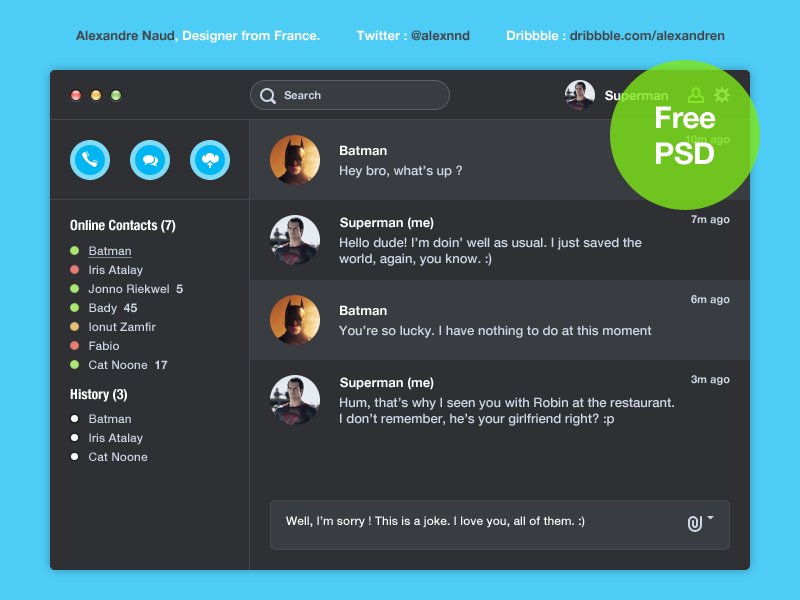
<style>
.page{position:relative;width:800px;height:600px;background:#2e3033}
.page>*{position:absolute;margin:0}
.t1{font:13px "HelveticaNeue-Bold";color:#ffffff}
.t2{font:13px "HelveticaNeue-Bold";color:#45474d}
.t3{font:11px "HelveticaNeue-Bold";color:#cfd6e6}
.t4{font:13px "HelveticaNeue-Bold";color:#98eb45}
.t5{font:30px "HelveticaNeue-Bold";letter-spacing:-0.015em;color:#ffffff}
.t6{font:11px "HelveticaNeue-Bold";color:#8ee340}
.t7{font:13px "HelveticaNeue-Medium";color:#cfd6e6}
.t8{font:14px "HelveticaNeue-CondensedBold";color:#ffffff}
.t9{font:12px "HelveticaNeue-Medium";color:#cfd6e6;text-decoration:underline}
.t10{font:12px "HelveticaNeue-Medium";color:#cfd6e6}
.t11{font:12px "HelveticaNeue-Bold";color:#cfd6e6}
.t12{font:12px "HelveticaNeue-Medium";color:#ffffff}
</style>
<div class="page">
<p class="t1" style="left:76px;top:30px;width:649px;height:13px"><span class="t2">Alexandre Naud</span>, Designer from France.          Twitter : <span class="t2">@alexnnd</span>          Dribbble : <span class="t2">dribbble.com/alexandren</span></p>
<p class="t3" style="left:284px;top:91px;width:37px;height:9px">Search</p>
<p class="t4" style="left:605px;top:90px;width:63px;height:13px">Superman</p>
<p class="t5" style="left:656px;top:106px;width:60px;height:59px">Free<br>PSD</p>
<p class="t6" style="left:685px;top:135px;width:45px;height:10px">10m ago</p>
<p class="t1" style="left:340px;top:145px;width:47px;height:11px">Batman</p>
<p class="t7" style="left:340px;top:165px;width:122px;height:13px">Hey bro, what’s up ?</p>
<p class="t8" style="left:70px;top:219px;width:106px;height:14px">Online Contacts (7)</p>
<p class="t1" style="left:340px;top:217px;width:94px;height:13px">Superman (me)</p>
<p class="t3" style="left:691px;top:215px;width:39px;height:10px">7m ago</p>
<p class="t9" style="left:88px;top:246px;width:44px;height:12px">Batman</p>
<p class="t7" style="left:339px;top:237px;width:303px;height:29px">Hello dude! I’m doin’ well as usual. I just saved the<br>world, again, you know. :)</p>
<p class="t10" style="left:89px;top:265px;width:54px;height:12px">Iris Atalay</p>
<p class="t10" style="left:88px;top:284px;width:95px;height:10px">Jonno Riekwel<span class="t11">  5</span></p>
<p class="t10" style="left:89px;top:303px;width:48px;height:12px">Bady<span class="t11">  45</span></p>
<p class="t1" style="left:340px;top:305px;width:47px;height:11px">Batman</p>
<p class="t3" style="left:691px;top:295px;width:39px;height:10px">6m ago</p>
<p class="t10" style="left:89px;top:322px;width:67px;height:9px">Ionut Zamfir</p>
<p class="t7" style="left:338px;top:325px;width:314px;height:13px">You’re so lucky. I have nothing to do at this moment</p>
<p class="t10" style="left:89px;top:341px;width:30px;height:9px">Fabio</p>
<p class="t10" style="left:89px;top:360px;width:79px;height:9px">Cat Noone<span class="t11">  17</span></p>
<p class="t1" style="left:340px;top:377px;width:94px;height:13px">Superman (me)</p>
<p class="t3" style="left:691px;top:375px;width:39px;height:10px">3m ago</p>
<p class="t8" style="left:70px;top:389px;width:57px;height:13px">History (3)</p>
<p class="t7" style="left:340px;top:397px;width:334px;height:29px">Hum, that’s why I seen you with Robin at the restaurant.<br>I don’t remember, he’s your girlfriend right? :p</p>
<p class="t10" style="left:89px;top:414px;width:42px;height:9px">Batman</p>
<p class="t10" style="left:89px;top:433px;width:54px;height:12px">Iris Atalay</p>
<p class="t10" style="left:89px;top:452px;width:59px;height:9px">Cat Noone</p>
<p class="t12" style="left:286px;top:516px;width:299px;height:12px">Well, I’m sorry ! This is a joke. I love you, all of them. :)</p>
</div>
